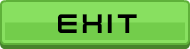
<style>
.page{position:relative;width:190px;height:49px;background:#88e060}
.page>*{position:absolute;margin:0}
.t1{font:30px "KenVector-Future";color:#000000}
</style>
<div class="page">
<p class="t1" style="left:57px;top:14px;width:80px;height:19px">exit</p>
</div>
